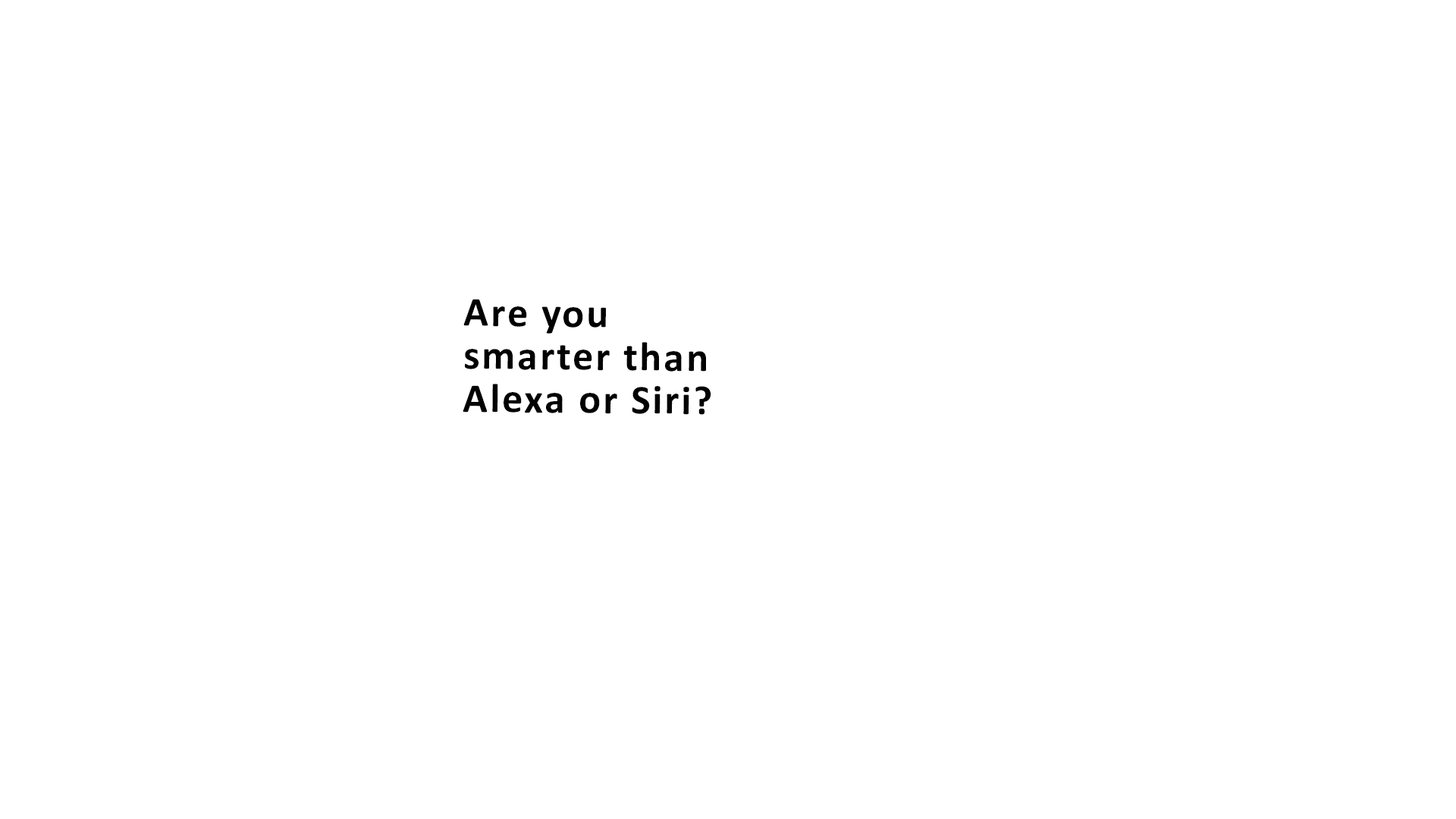
<style>
.page{position:relative;width:1456px;height:819px;background:#ffffff}
.page>*{position:absolute;margin:0}
.t1{font:41.2px/43px "Calibri-Bold";letter-spacing:0.05em;color:#020202}
</style>
<div class="page">
<p class="t1" style="left:463px;top:299px;width:248px;height:116px;rotate:1deg">Are you<br>smarter than <br>Alexa or Siri?</p>
</div>
